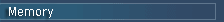
<style>
.page{position:relative;width:224px;height:22px;background:#314965}
.page>*{position:absolute;margin:0}
.t1{font:12.1px "Verdana";color:#ffffff;scale:0.91 1}
</style>
<div class="page">
<p class="t1" style="left:9px;top:7px;width:44px;height:11px">Memory</p>
</div>
